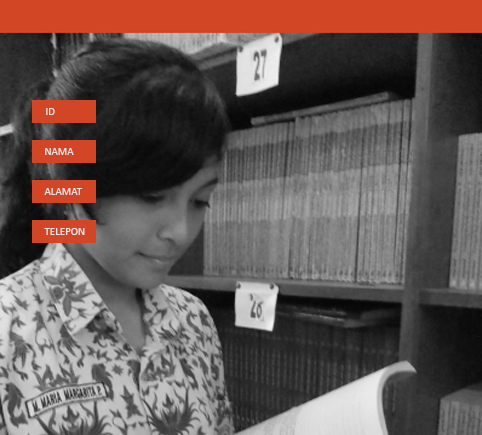
<style>
.page{position:relative;width:482px;height:435px}
.page>*{position:absolute;margin:0}
.t1{font:11px "Calibri";color:#e5e5e5}
</style>
<div class="page">
<p class="t1" style="left:46px;top:108px;width:9px;height:7px">ID</p>
<p class="t1" style="left:45px;top:148px;width:29px;height:7px">NAMA</p>
<p class="t1" style="left:44px;top:188px;width:39px;height:7px">ALAMAT</p>
<p class="t1" style="left:44px;top:228px;width:41px;height:7px">TELEPON</p>
</div>
